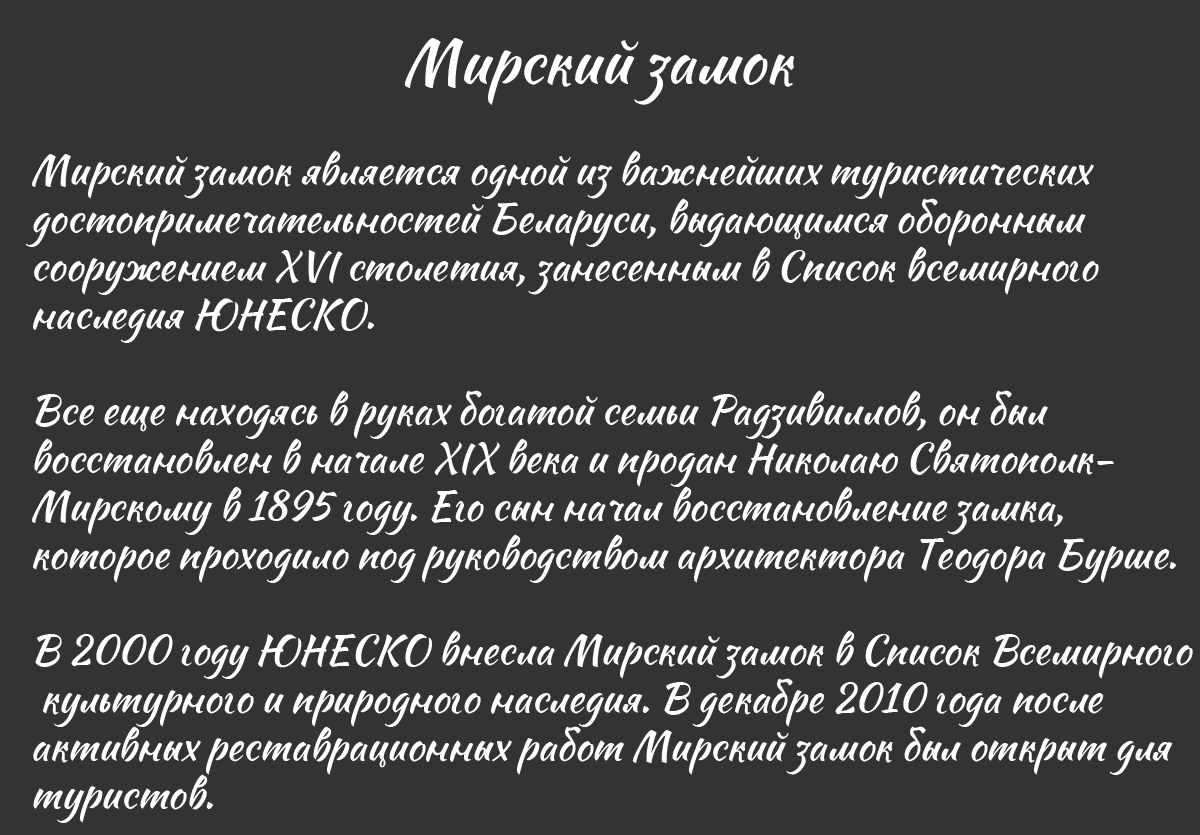
<style>
.page{position:relative;width:1200px;height:835px;background:#333333}
.page>*{position:absolute;margin:0}
.t1{font:60px "Sweet-Mavka-Script";color:#ffffff}
.t2{font:40px "Sweet-Mavka-Script";color:#ffffff}
</style>
<div class="page">
<p class="t1" style="left:404px;top:38px;width:391px;height:67px">Мирский замок</p>
<p class="t2" style="left:25px;top:150px;width:1168px;height:673px">Мирский замок является одной из важнейших туристических <br>достопримечательностей Беларуси, выдающимся оборонным <br>сооружением XVI столетия, занесенным в Список всемирного <br>наследия ЮНЕСКО.<br><br>Все еще находясь в руках богатой семьи Радзивиллов, он был <br>восстановлен в начале XIX века и продан Николаю Святополк-<br>Мирскому в 1895 году. Его сын начал восстановление замка, <br>которое проходило под руководством архитектора Теодора Бурше.<br><br>В 2000 году ЮНЕСКО внесла Мирский замок в Список Всемирного<br> культурного и природного наследия. В декабре 2010 года после <br>активных реставрационных работ Мирский замок был открыт для <br>туристов.</p>
</div>
